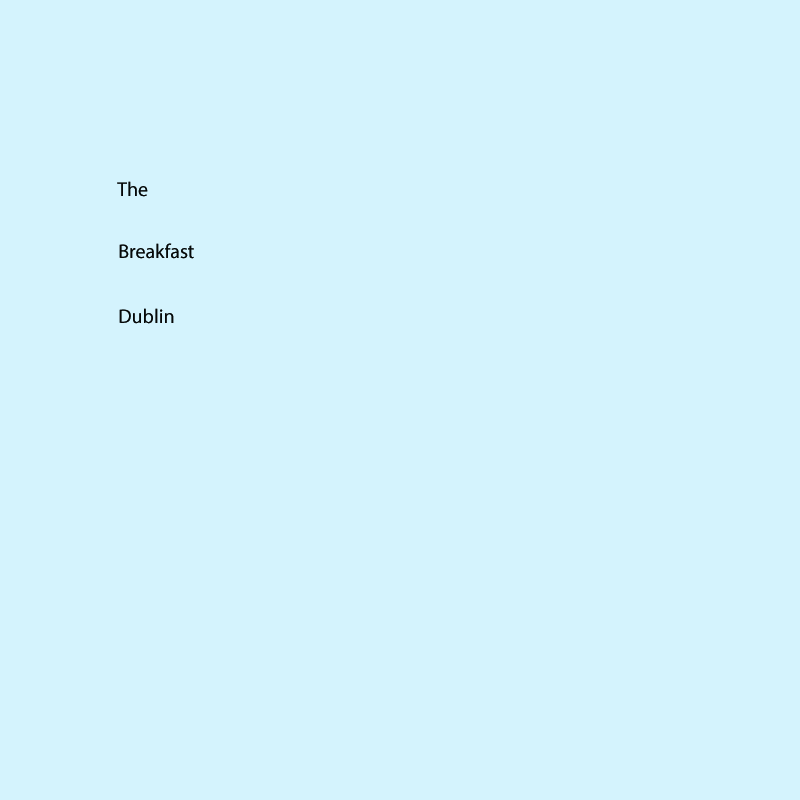
<style>
.page{position:relative;width:800px;height:800px;background:#d4f3fd}
.page>*{position:absolute;margin:0}
.t1{font:20px "MyriadPro-Regular";color:#060808}
</style>
<div class="page">
<p class="t1" style="left:117px;top:181px;width:31px;height:16px">The</p>
<p class="t1" style="left:119px;top:243px;width:75px;height:16px">Breakfast</p>
<p class="t1" style="left:119px;top:308px;width:55px;height:16px">Dublin</p>
</div>
